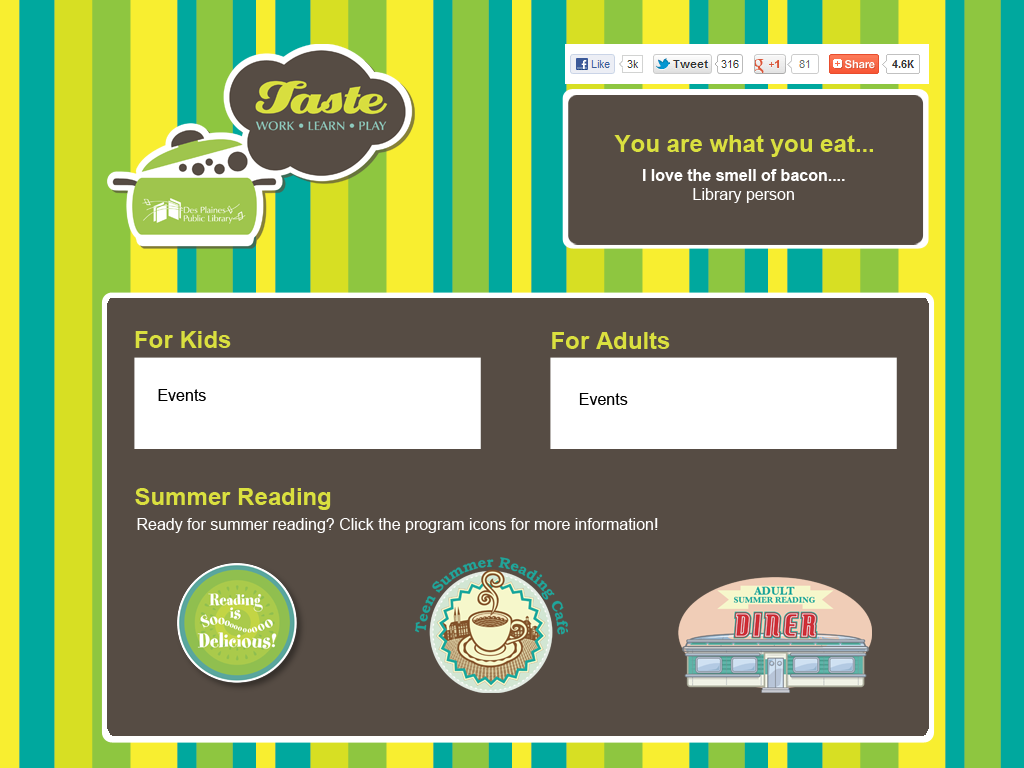
<style>
.page{position:relative;width:1024px;height:768px;background:#564c44}
.page>*{position:absolute;margin:0}
.t1{font:24px "Arial-BoldMT";color:#dae03f}
.t2{font:16px "Arial-BoldMT";color:#ffffff}
.t3{font:16px "ArialMT";color:#ffffff}
.t4{font:16px "ArialMT";color:#000000}
</style>
<div class="page">
<p class="t1" style="left:614px;top:135px;width:259px;height:22px">You are what you eat...</p>
<p class="t2" style="left:643px;top:169px;width:202px;height:34px;text-align:center">I love the smell of bacon....<br><span class="t3">Library person</span></p>
<p class="t1" style="left:135px;top:331px;width:96px;height:17px">For Kids</p>
<p class="t1" style="left:552px;top:332px;width:118px;height:17px">For Adults</p>
<p class="t4" style="left:158px;top:389px;width:48px;height:12px">Events</p>
<p class="t4" style="left:579px;top:393px;width:49px;height:12px">Events</p>
<p class="t1" style="left:135px;top:488px;width:196px;height:22px">Summer Reading</p>
<p class="t3" style="left:137px;top:518px;width:521px;height:15px">Ready for summer reading? Click the program icons for more information!</p>
</div>
